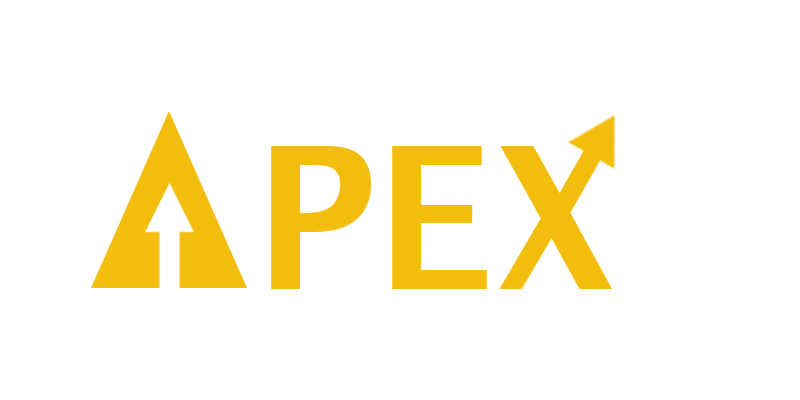
<style>
.page{position:relative;width:800px;height:400px;background:#ffffff}
.page>*{position:absolute;margin:0}
.t1{font:198px "LucidaSans-TypewriterBold";color:#f3bd0d}
</style>
<div class="page">
<p class="t1" style="left:271px;top:146px;width:342px;height:143px">PEX</p>
</div>
